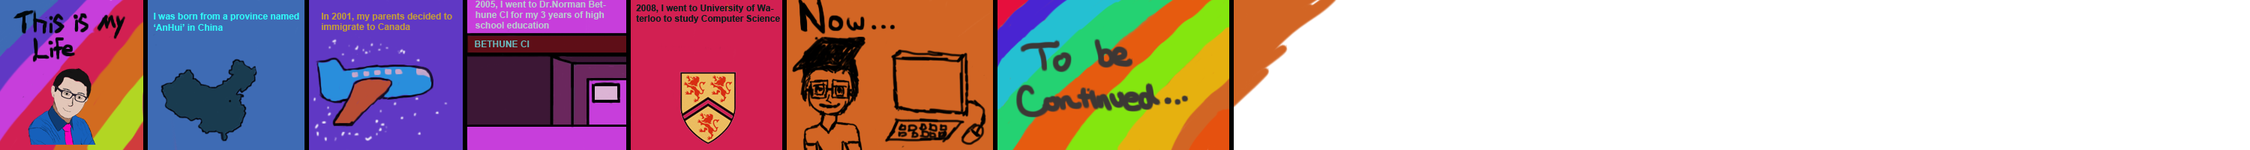
<style>
.page{position:relative;width:2250px;height:150px;background:#ffffff}
.page>*{position:absolute;margin:0}
.t1{font:9px "Arial-BoldMT";color:#b9cdce}
.t2{font:9px "Arial-BoldMT";color:#051d1b}
.t3{font:9px "Arial-BoldMT";color:#c49e38}
.t4{font:9px "Arial-BoldMT";color:#69b9bc}
</style>
<div class="page">
<p class="t1" style="left:475px;top:1px;width:131px;height:27px">2005, I went to Dr.Norman Bethune CI for my 3 years of high school education</p>
<p class="t2" style="left:636px;top:4px;width:144px;height:19px">2008, I went to University of Waterloo to study Computer Science</p>
<p class="t3" style="left:322px;top:13px;width:130px;height:18px">In 2001, my parents decided to immigrate to Canada</p>
<p class="t4" style="left:475px;top:40px;width:54px;height:7px">BETHUNE CI</p>
</div>
